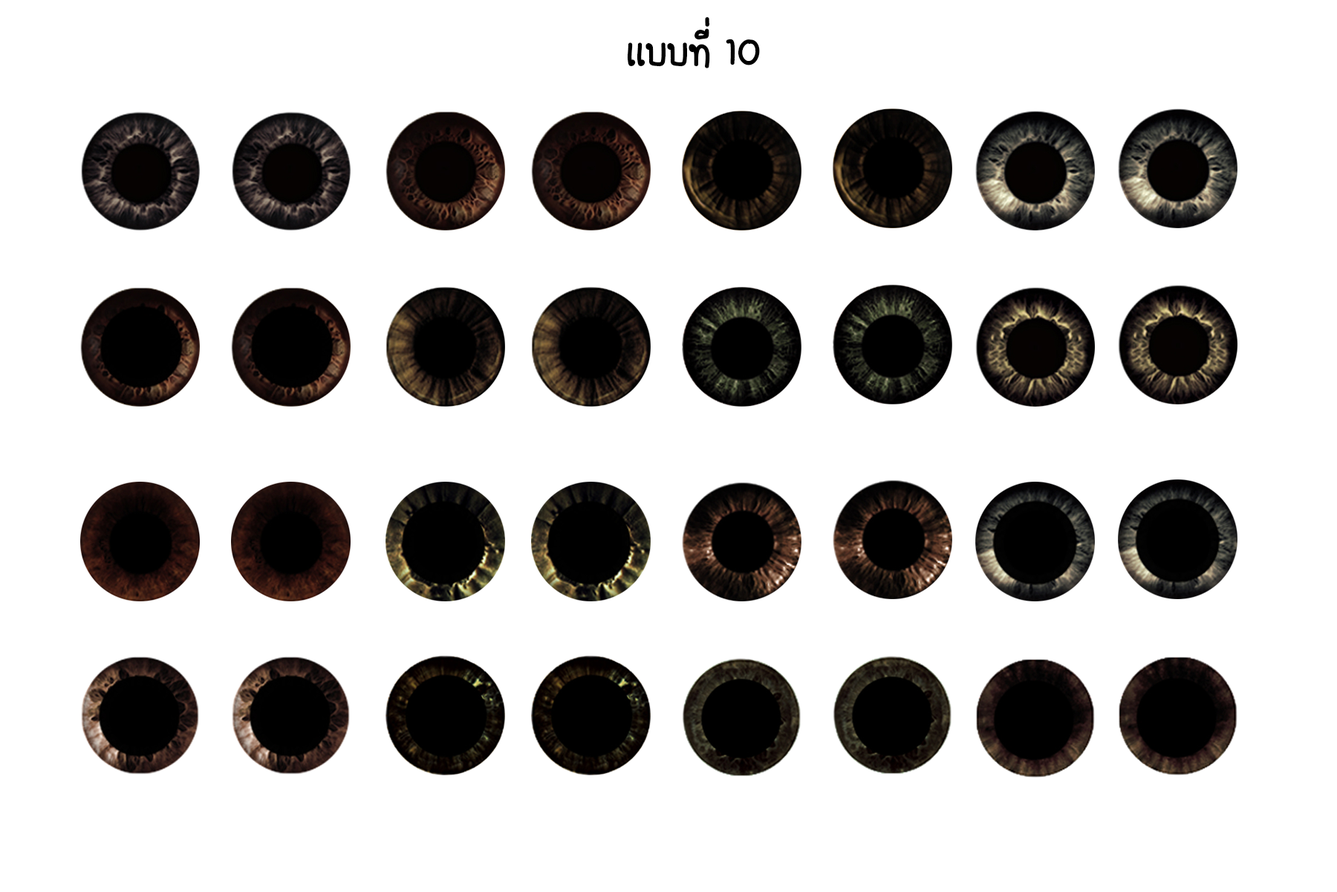
<style>
.page{position:relative;width:1337px;height:892px;background:#ffffff}
.page>*{position:absolute;margin:0}
.t1{font:55.7px "FCDaisyRegular";color:#000000}
</style>
<div class="page">
<p class="t1" style="left:627px;top:17px;width:133px;height:51px">เเบบที่ 10</p>
</div>
